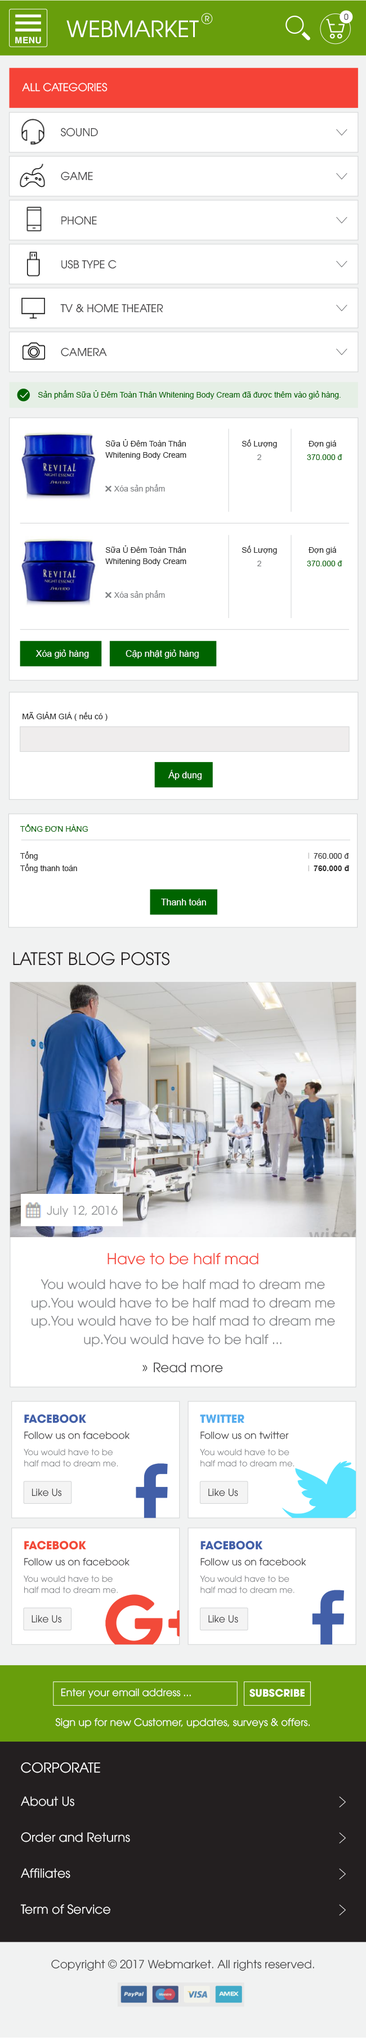
<style>
.page{position:relative;width:366px;height:2038px;background:#ffffff}
.page>*{position:absolute;margin:0}
.t1{font:7.3px "UTM-Avo";color:#ffffff}
.t2{font:7.9px "UTM-Avo"}
.t3{font:22.5px "UTM-Avo";color:#ffffff}
.t4{font:8.8px "UTMHelveBold";color:#ffffff}
.t5{font:10.7px "UTM-Avo";color:#ffffff}
.t6{font:10.7px "UTM-Avo";color:#414042}
.t7{font:7.9px "ArialMT";color:#006400}
.t8{font:7.9px/11.2px "ArialMT";color:#282828}
.t9{font:7.9px "ArialMT";color:#282828}
.t10{font:7.9px "ArialMT";color:#808285}
.t11{font:9px "ArialMT";color:#ffffff}
.t12{font:7.9px "Arial-BoldMT";color:#282828}
.t13{font:17.2px "UTM-Avo";color:#231f20}
.t14{font:11.8px "UTM-Avo";color:#939598}
.t15{font:15.1px "UTM-Avo";color:#f54337}
.t16{font:12.9px/18.3px "UTM-Avo";color:#808285}
.t17{font:12.9px "UTM-Avo";color:#414042}
.t18{font:10.1px "UTM-Avo";color:#ffffff}
.t19{font:10.1px "UTMAvoBold";color:#ffffff}
.t20{font:13.5px "UTM-Avo";color:#ffffff}
.t21{font:12.4px "UTM-Avo";color:#ffffff}
.t22{font:11.2px "UTM-Avo";color:#414042}
</style>
<div class="page">
<p class="t1" style="left:205px;top:16px;width:4px;height:6px">R</p>
<p class="t2" style="left:344px;top:14px;width:4px;height:6px">0</p>
<p class="t3" style="left:66px;top:20px;width:133px;height:17px">WEBMARKET</p>
<p class="t4" style="left:15px;top:37px;width:26px;height:7px">MENU</p>
<p class="t5" style="left:22px;top:83px;width:85px;height:9px">ALL CATEGORIES</p>
<p class="t6" style="left:61px;top:128px;width:37px;height:9px">SOUND</p>
<p class="t6" style="left:61px;top:172px;width:32px;height:9px">GAME</p>
<p class="t6" style="left:61px;top:216px;width:36px;height:9px">PHONE</p>
<p class="t6" style="left:61px;top:260px;width:55px;height:9px">USB TYPE C</p>
<p class="t6" style="left:60px;top:304px;width:103px;height:9px">TV &amp; HOME THEATER</p>
<p class="t6" style="left:61px;top:348px;width:46px;height:9px">CAMERA</p>
<p class="t7" style="left:38px;top:390px;width:302px;height:9px">Sản phẩm Sữa Ủ Đêm Toàn Thân Whitening Body Cream đã được thêm vào giỏ hàng.</p>
<p class="t8" style="left:105px;top:439px;width:81px;height:21px">Sữa Ủ Đêm Toàn Thân<br>Whitening Body Cream</p>
<p class="t9" style="left:241px;top:439px;width:36px;height:9px">Số Lượng</p>
<p class="t9" style="left:308px;top:440px;width:28px;height:8px">Đợn giá</p>
<p class="t10" style="left:257px;top:454px;width:4px;height:6px">2</p>
<p class="t7" style="left:307px;top:454px;width:35px;height:6px">370.000 đ</p>
<p class="t10" style="left:114px;top:484px;width:51px;height:9px">Xóa sản phẩm</p>
<p class="t8" style="left:105px;top:546px;width:81px;height:20px">Sữa Ủ Đêm Toàn Thân<br>Whitening Body Cream</p>
<p class="t9" style="left:241px;top:546px;width:36px;height:9px">Số Lượng</p>
<p class="t9" style="left:308px;top:547px;width:28px;height:8px">Đợn giá</p>
<p class="t10" style="left:257px;top:561px;width:4px;height:5px">2</p>
<p class="t7" style="left:307px;top:561px;width:35px;height:5px">370.000 đ</p>
<p class="t10" style="left:114px;top:591px;width:51px;height:9px">Xóa sản phẩm</p>
<p class="t11" style="left:35px;top:650px;width:54px;height:9px">Xóa giỏ hàng</p>
<p class="t11" style="left:125px;top:650px;width:74px;height:9px">Cập nhật giỏ hàng</p>
<p class="t9" style="left:22px;top:712px;width:85px;height:9px">MÃ GIẢM GIÁ ( nếu có )</p>
<p class="t11" style="left:168px;top:770px;width:33px;height:10px">Áp dụng</p>
<p class="t7" style="left:20px;top:825px;width:68px;height:7px">TỔNG ĐƠN HÀNG</p>
<p class="t9" style="left:20px;top:852px;width:18px;height:9px">Tổng</p>
<p class="t9" style="left:313px;top:853px;width:36px;height:6px">760.000 đ</p>
<p class="t9" style="left:20px;top:864px;width:57px;height:9px">Tổng thanh toán</p>
<p class="t12" style="left:313px;top:866px;width:36px;height:5px">760.000 đ</p>
<p class="t11" style="left:161px;top:899px;width:45px;height:7px">Thanh toán</p>
<p class="t13" style="left:13px;top:952px;width:156px;height:14px">LATEST BLOG POSTS</p>
<p class="t14" style="left:47px;top:1206px;width:71px;height:12px">July 12, 2016</p>
<p class="t15" style="left:107px;top:1253px;width:151px;height:12px">Have to be half mad</p>
<p class="t16" style="left:32px;top:1279px;width:303px;height:68px;text-align:center">You would have to be half mad to dream me up.You would have to be half mad to dream me up.You would have to be half mad to dream me up.You would have to be half ...</p>
<p class="t17" style="left:154px;top:1362px;width:69px;height:11px">Read more</p>
<p class="t18" style="left:61px;top:1689px;width:130px;height:10px">Enter your email address ...</p>
<p class="t19" style="left:249px;top:1689px;width:55px;height:9px">SUBSCRIBE</p>
<p class="t18" style="left:55px;top:1718px;width:254px;height:11px">Sign up for new Customer, updates, surveys &amp; offers.</p>
<p class="t20" style="left:21px;top:1762px;width:79px;height:12px">CORPORATE</p>
<p class="t21" style="left:21px;top:1797px;width:53px;height:10px">About Us</p>
<p class="t21" style="left:21px;top:1833px;width:109px;height:10px">Order and Returns</p>
<p class="t21" style="left:21px;top:1869px;width:49px;height:10px">Affiliates</p>
<p class="t21" style="left:20px;top:1905px;width:90px;height:10px">Term of Service</p>
<p class="t22" style="left:51px;top:1960px;width:263px;height:12px">Copyright © 2017 Webmarket. All rights reserved.</p>
</div>
